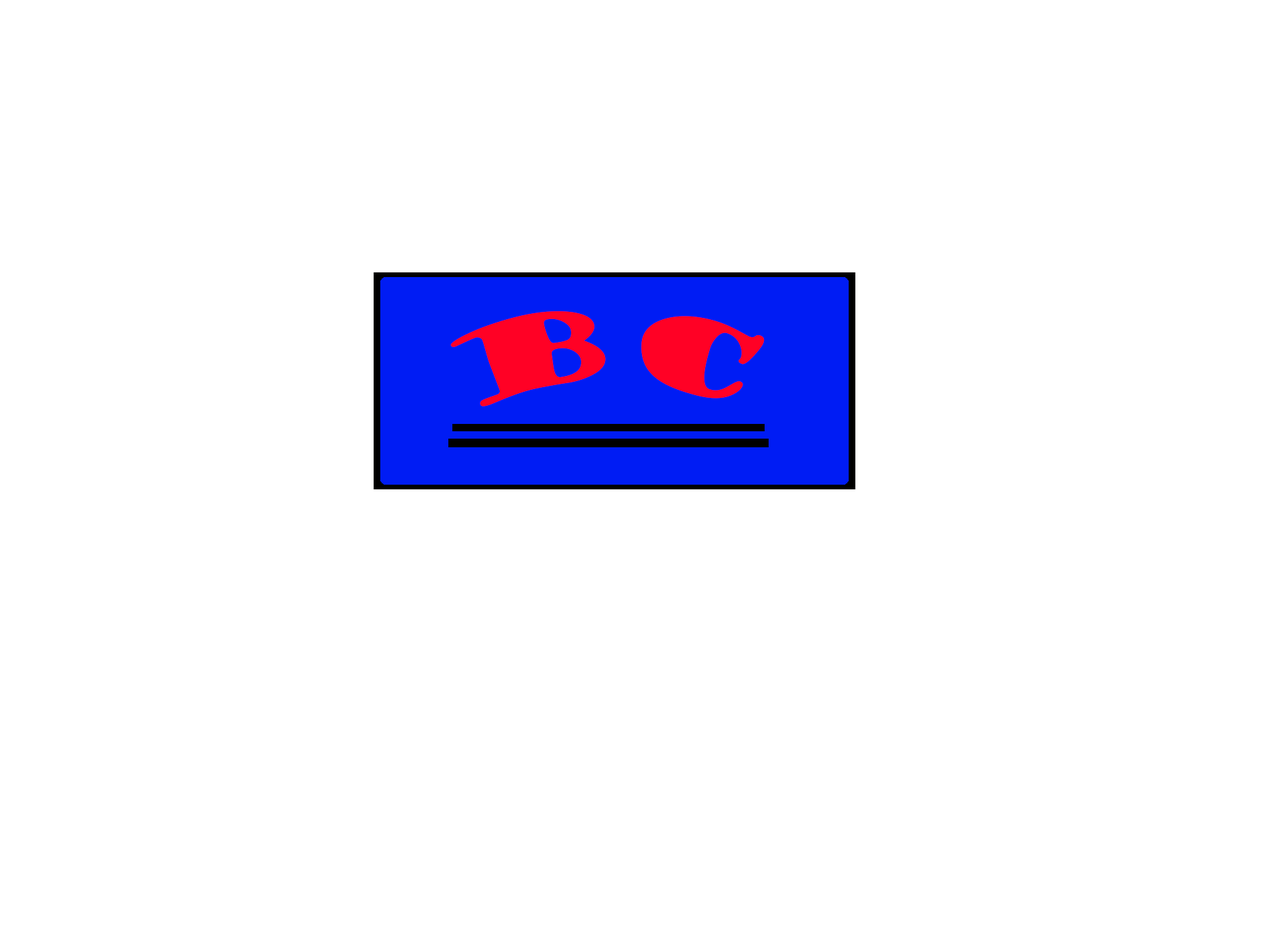
<style>
.page{position:relative;width:1261px;height:946px;background:#ffffff}
.page>*{position:absolute;margin:0}
.t1{font:100.1px "GoudyStout";color:#ff0125}
</style>
<div class="page">
<p class="t1" style="left:450px;top:311px;width:315px;height:95px">BC</p>
</div>
